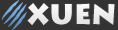
<style>
.page{position:relative;width:118px;height:30px;background:#333333}
.page>*{position:absolute;margin:0}
.t1{font:32.9px "LithosPro-Black";color:#ffffff;scale:0.95 1}
</style>
<div class="page">
<p class="t1" style="left:27px;top:3px;width:88px;height:23px">xuen</p>
</div>
